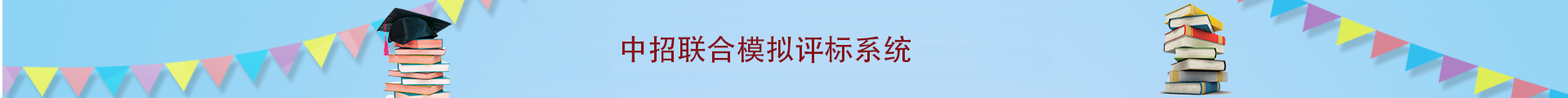
<style>
.page{position:relative;width:1568px;height:98px}
.page>*{position:absolute;margin:0}
.t1{font:29.4px "AdobeHeitiStd-Regular";color:#861018}
</style>
<div class="page">
<p class="t1" style="left:621px;top:35px;width:290px;height:29px">中招联合模拟评标系统</p>
</div>
